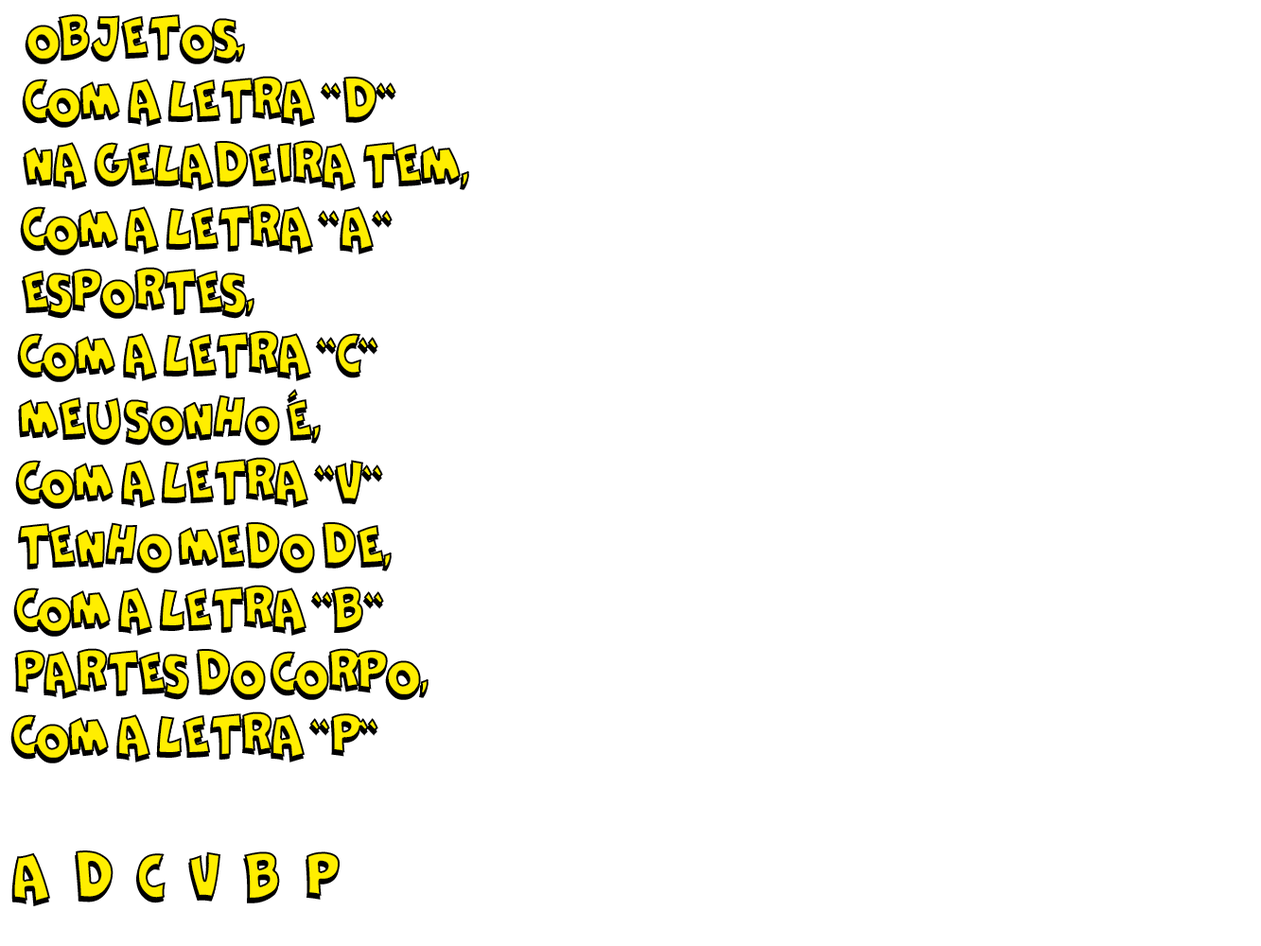
<style>
.page{position:relative;width:1261px;height:946px;background:#ffffff}
.page>*{position:absolute;margin:0}
.t1{font:53px "ComicaBDBold";letter-spacing:-0.1em;color:#ffee00;text-transform:uppercase;scale:0.95 1}
.t2{font:59.6px "ComicaBDBold";letter-spacing:-0.1em;color:#ffee00;text-transform:uppercase;scale:0.95 1}
</style>
<div class="page">
<p class="t1" style="left:11px;top:14px;width:458px;height:888px">objetos, <br>com a letra ``d``<br>na geladeira tem, <br>com a letra ``a``<br>esportes, <br>com a letra ``c``<br>meu sonho é, <br>com a letra ``v``<br>tenho medo de, <br>com a letra ``b``<br>partes do corpo, <br>com a letra ``p``<br><span class="t2"><br>a   d   c   v   b   p</span></p>
</div>
